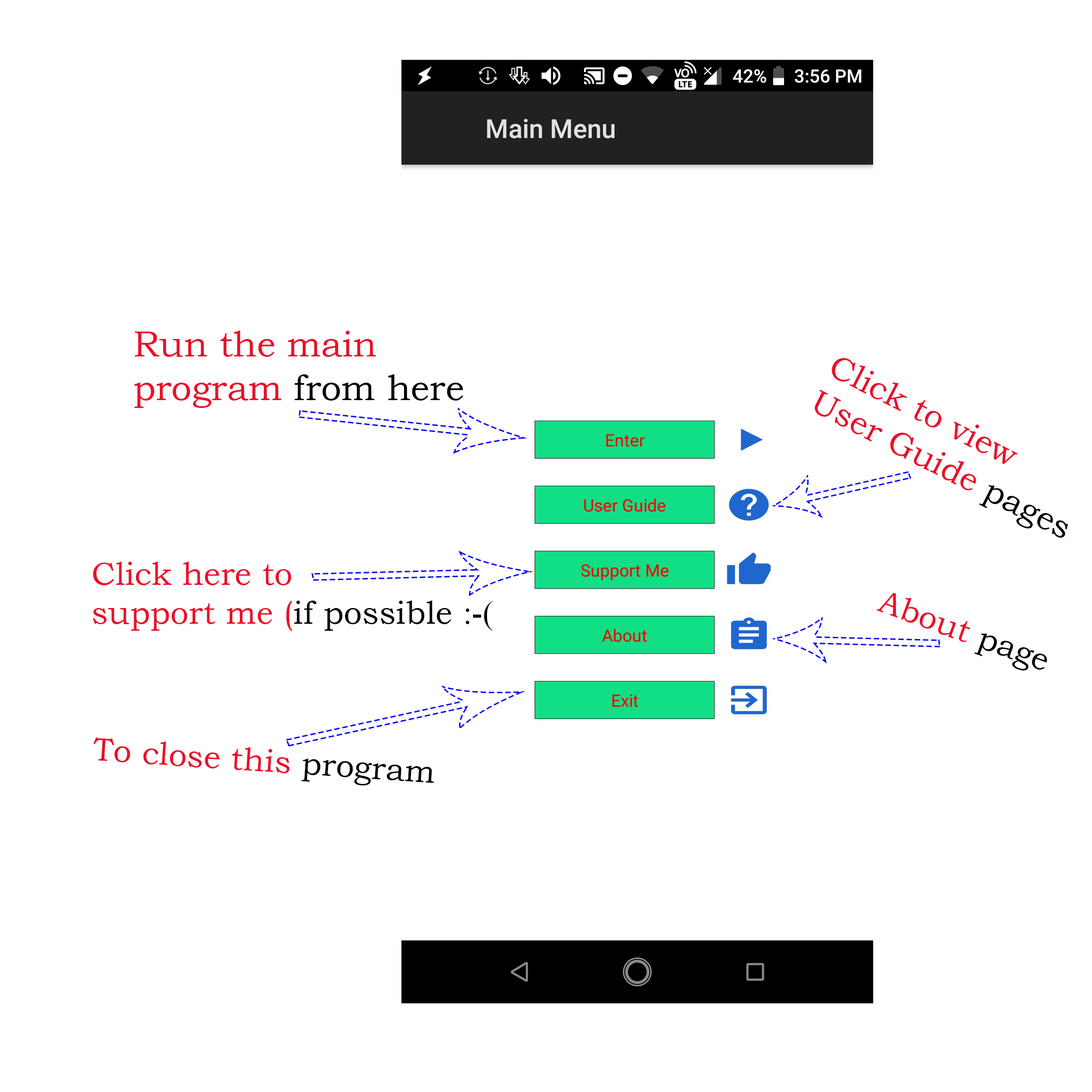
<style>
.page{position:relative;width:1092px;height:1092px;background:#ffffff}
.page>*{position:absolute;margin:0}
.t1{font:36.1px "BookmanOldStyle";color:#eb0f29}
.t2{font:36.1px "BookmanOldStyle";color:#000000}
.t3{font:33.4px "BookmanOldStyle";color:#eb0f29}
.t4{font:33.4px "BookmanOldStyle";color:#000000}
.t5{font:32.5px "BookmanOldStyle";color:#eb0f29}
.t6{font:32.5px "BookmanOldStyle";color:#000000}
.t7{font:32.5px "TimesNewRomanPSMT";color:#000000}
</style>
<div class="page">
<p class="t1" style="left:134px;top:331px;width:329px;height:77px">Run the main<br>program <span class="t2">from here</span></p>
<p class="t3" style="left:815px;top:358px;width:253px;height:180px;rotate:27deg">Click to view<br>User Guide <span class="t4">pages</span></p>
<p class="t5" style="left:93px;top:562px;width:400px;height:69px">Click here to<br>support me (<span class="t6">if possible </span><span class="t7">:-(</span></p>
<p class="t5" style="left:877px;top:593px;width:170px;height:77px;rotate:20deg">About <span class="t6">page</span></p>
<p class="t5" style="left:93px;top:737px;width:341px;height:48px;rotate:4deg">To close this <span class="t6">program</span></p>
</div>
